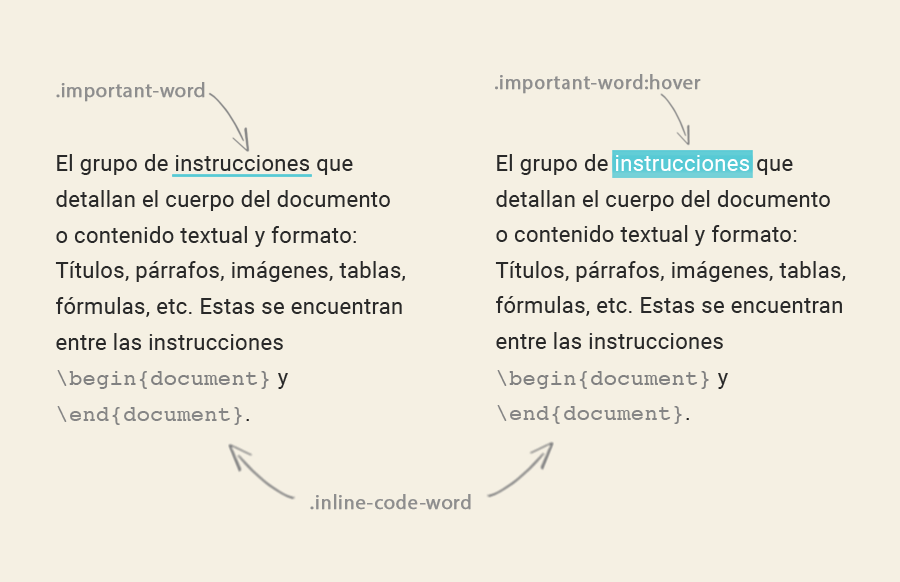
<style>
.page{position:relative;width:900px;height:582px;background:#f5f0e3}
.page>*{position:absolute;margin:0}
.t1{font:20px "MyriadPro-Regular";letter-spacing:0.015em;color:#8e8e8e;font-weight:bold}
.t2{font:22px/35.6px "Roboto-Regular";letter-spacing:0.015em;color:#292929}
.t3{font:22px/35.6px "Courier";letter-spacing:0.015em;color:#818181}
.t4{font:22px/35.6px "Courier";letter-spacing:0.015em;color:#858585}
.t5{font:22px/35.6px "Roboto-Regular";letter-spacing:0.015em;color:#212121}
.t6{font:22px/35.6px "Roboto-Regular";letter-spacing:0.015em;color:#ffffff}
</style>
<div class="page">
<p class="t1" style="left:495px;top:74px;width:206px;height:20px">.important-word:hover</p>
<p class="t1" style="left:56px;top:82px;width:149px;height:20px">.important-word</p>
<p class="t2" style="left:55px;top:154px;width:350px;height:271px">El grupo de instrucciones que<br>detallan el cuerpo del documento<br>o contenido textual y formato:<br>Títulos, párrafos, imágenes, tablas,<br>fórmulas, etc. Estas se encuentran<br>entre las instrucciones<br><span class="t3">\begin{document}</span> y<br><span class="t4">\end{document}</span><span class="t5">.</span></p>
<p class="t2" style="left:495px;top:154px;width:351px;height:270px">El grupo de <span class="t6">instrucciones</span> que<br>detallan el cuerpo del documento<br>o contenido textual y formato:<br>Títulos, párrafos, imágenes, tablas,<br>fórmulas, etc. Estas se encuentran<br>entre las instrucciones<br><span class="t3">\begin{document}</span> y<br><span class="t4">\end{document}</span><span class="t5">.</span></p>
<p class="t1" style="left:310px;top:494px;width:161px;height:16px">.inline-code-word</p>
</div>
